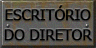
<style>
.page{position:relative;width:96px;height:48px}
.page>*{position:absolute;margin:0}
.t1{font:14.7px/20px "Tahoma";letter-spacing:-0.01em;color:#000000;text-transform:uppercase;font-weight:bold}
</style>
<div class="page">
<p class="t1" style="left:4px;top:5px;width:88px;height:36px;text-align:center">Escritório<br>do Diretor</p>
</div>
